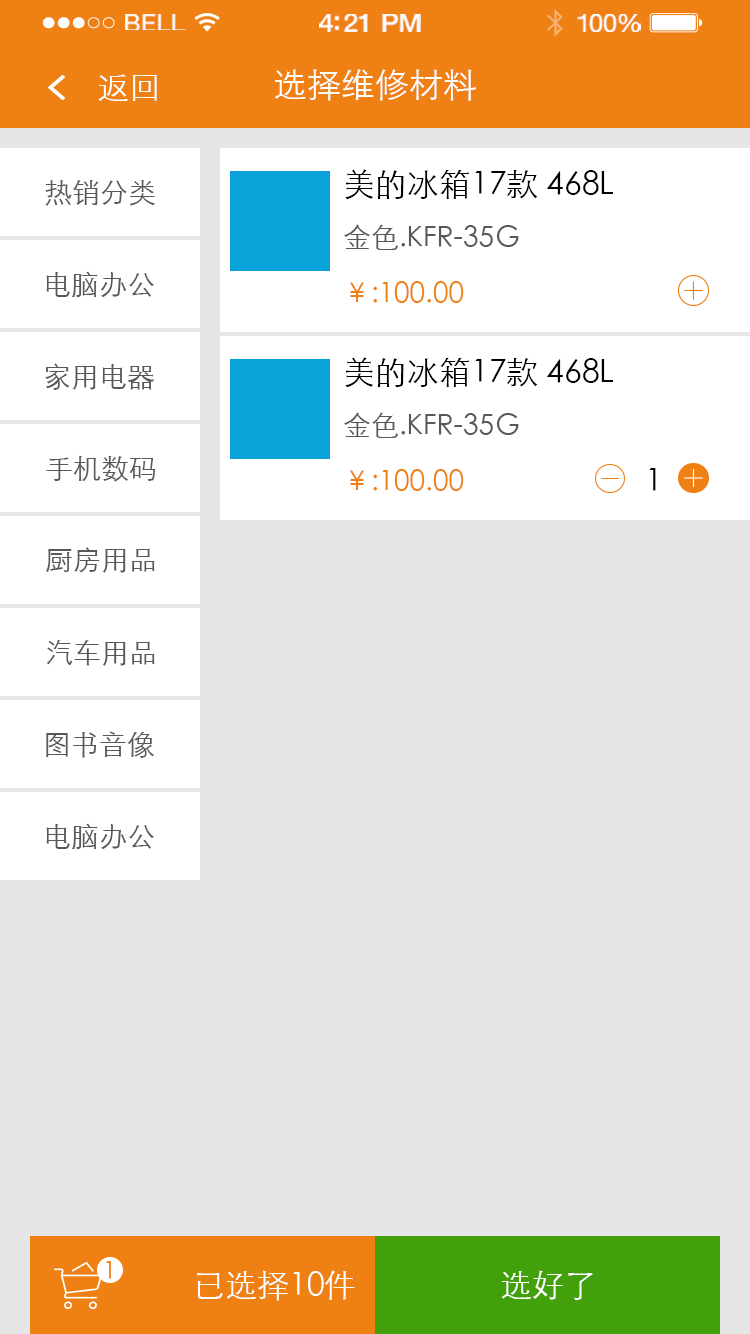
<style>
.page{position:relative;width:750px;height:1334px;background:#e6e6e6}
.page>*{position:absolute;margin:0}
.t1{font:23.3px "HelveticaNeue";letter-spacing:0.02em;color:#ffffff;scale:1.06 1}
.t2{font:25.3px "HelveticaNeue-Medium";letter-spacing:-0.02em;color:#ffffff;scale:1.06 1}
.t3{font:24.3px "HelveticaNeue";letter-spacing:-0.02em;color:#ffffff;scale:1.06 1}
.t4{font:32px "STXihei";color:#ffffff}
.t5{font:34px "STXihei";color:#ffffff}
.t6{font:32px/56px "STXihei";color:#000000}
.t7{font:28px/56px "STXihei";color:#595757}
.t8{font:28px/56px "STXihei";color:#ef8013}
.t9{font:28px "STXihei";color:#595757}
.t10{font:32px "STXihei";color:#000000}
.t11{font:24px "STXihei";color:#ef8013}
</style>
<div class="page">
<p class="t1" style="left:125px;top:14px;width:61px;height:16px">BELL</p>
<p class="t2" style="left:319px;top:14px;width:102px;height:18px">4:21 PM</p>
<p class="t3" style="left:577px;top:14px;width:64px;height:18px">100%</p>
<p class="t4" style="left:98px;top:74px;width:59px;height:27px">返回</p>
<p class="t5" style="left:274px;top:69px;width:202px;height:32px">选择维修材料</p>
<p class="t6" style="left:344px;top:169px;width:269px;height:134px">美的冰箱17款 468L <br><span class="t7">金色.KFR-35G<br></span><span class="t8">￥:100.00</span></p>
<p class="t9" style="left:45px;top:180px;width:110px;height:26px">热销分类</p>
<p class="t9" style="left:46px;top:271px;width:108px;height:27px">电脑办公</p>
<p class="t9" style="left:45px;top:363px;width:110px;height:27px">家用电器</p>
<p class="t6" style="left:344px;top:357px;width:269px;height:134px">美的冰箱17款 468L <br><span class="t7">金色.KFR-35G<br></span><span class="t8">￥:100.00</span></p>
<p class="t9" style="left:46px;top:455px;width:110px;height:27px">手机数码</p>
<p class="t10" style="left:649px;top:468px;width:7px;height:23px">1</p>
<p class="t9" style="left:46px;top:547px;width:109px;height:26px">厨房用品</p>
<p class="t9" style="left:46px;top:640px;width:109px;height:26px">汽车用品</p>
<p class="t9" style="left:46px;top:731px;width:109px;height:27px">图书音像</p>
<p class="t9" style="left:46px;top:823px;width:108px;height:27px">电脑办公</p>
<p class="t11" style="left:106px;top:1261px;width:5px;height:18px">1</p>
<p class="t4" style="left:197px;top:1270px;width:158px;height:31px">已选择10件</p>
<p class="t4" style="left:501px;top:1270px;width:92px;height:30px">选好了</p>
</div>
